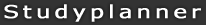
<style>
.page{position:relative;width:206px;height:25px;background:#333333}
.page>*{position:absolute;margin:0}
.t1{font:18px "Verdana";letter-spacing:0.2em;color:#ffffff;font-weight:bold;scale:1.25 1}
</style>
<div class="page">
<p class="t1" style="left:4px;top:4px;width:197px;height:18px">Studyplanner</p>
</div>
